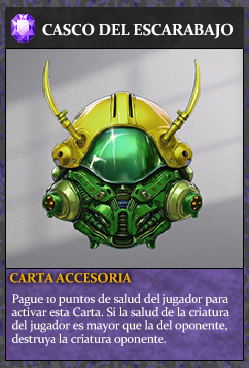
<style>
.page{position:relative;width:249px;height:368px}
.page>*{position:absolute;margin:0}
.t1{font:16px "Constantia-Bold";letter-spacing:-0.02em;color:#ffffff}
.t2{font:13.3px "Constantia-Bold";letter-spacing:-0.02em;color:#f2ac05}
.t3{font:12.3px/13.3px "Constantia";letter-spacing:-0.02em;color:#ffffff}
</style>
<div class="page">
<p class="t1" style="left:42px;top:23px;width:191px;height:16px">CASCO DEL ESCARABAJO</p>
<p class="t2" style="left:10px;top:273px;width:122px;height:10px">CARTA ACCESORIA</p>
<p class="t3" style="left:11px;top:293px;width:218px;height:53px">Pague 10 puntos de salud del jugador para<br>activar esta Carta. Si la salud de la criatura<br>del jugador es mayor que la del oponente,<br>destruya la criatura oponente.</p>
</div>
